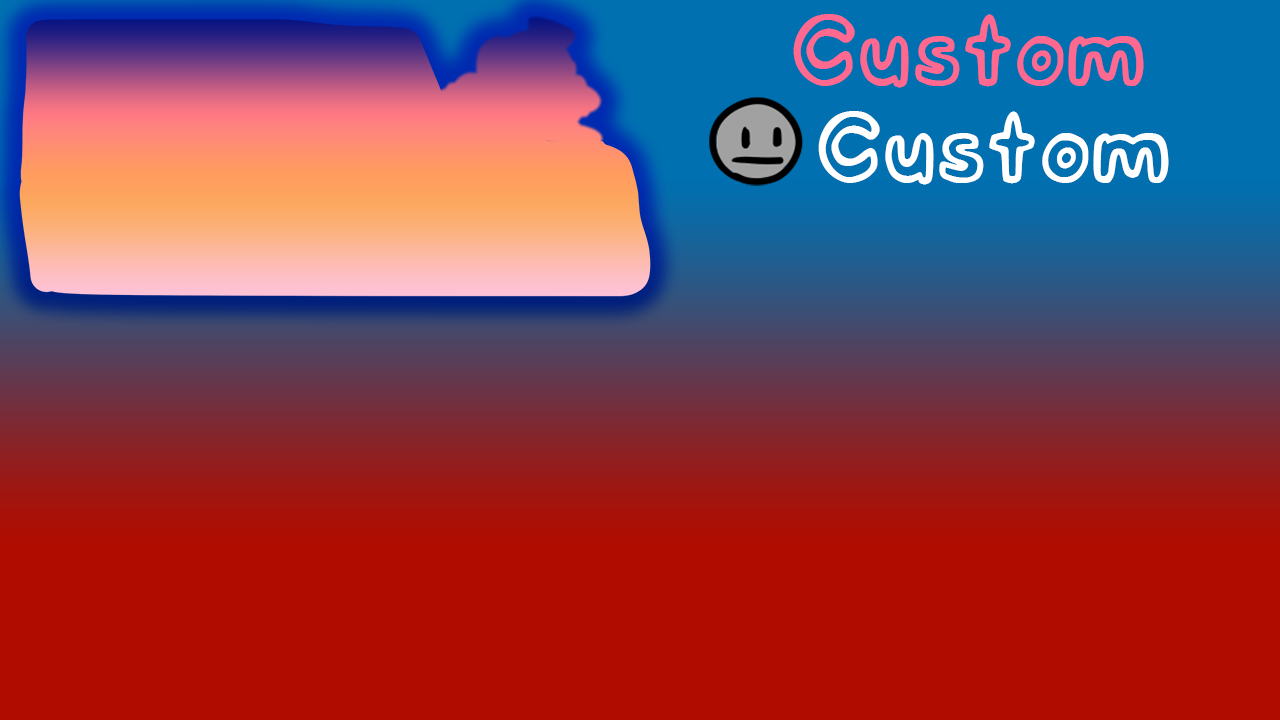
<style>
.page{position:relative;width:1280px;height:720px;background:#b00c00}
.page>*{position:absolute;margin:0}
.t1{font:87.5px "PhantomMuff1.5";color:#ff688f}
.t2{font:87.5px "PhantomMuff1.5";color:#ffffff}
</style>
<div class="page">
<p class="t1" style="left:793px;top:14px;width:351px;height:74px">Custom</p>
<p class="t2" style="left:818px;top:111px;width:351px;height:74px">Custom</p>
</div>
